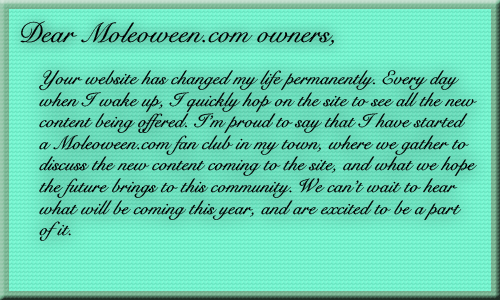
<style>
.page{position:relative;width:500px;height:300px}
.page>*{position:absolute;margin:0}
.t1{font:26px "CygnetRound";color:#000000}
.t2{font:18px "CygnetRound";color:#000000}
</style>
<div class="page">
<p class="t1" style="left:20px;top:21px;width:314px;height:25px">Dear Moleoween.com owners,</p>
<p class="t2" style="left:39px;top:70px;width:438px;height:171px">Your website has changed my life permanently. Every day <br>when I wake up, I quickly hop on the site to see all the new <br>content being offered. I’m proud to say that I have started<br>a Moleoween.com fan club in my town, where we gather to<br>discuss the new content coming to the site, and what we hope<br>the future brings to this community. We can’t wait to hear<br>what will be coming this year, and are excited to be a part<br>of it.</p>
</div>
